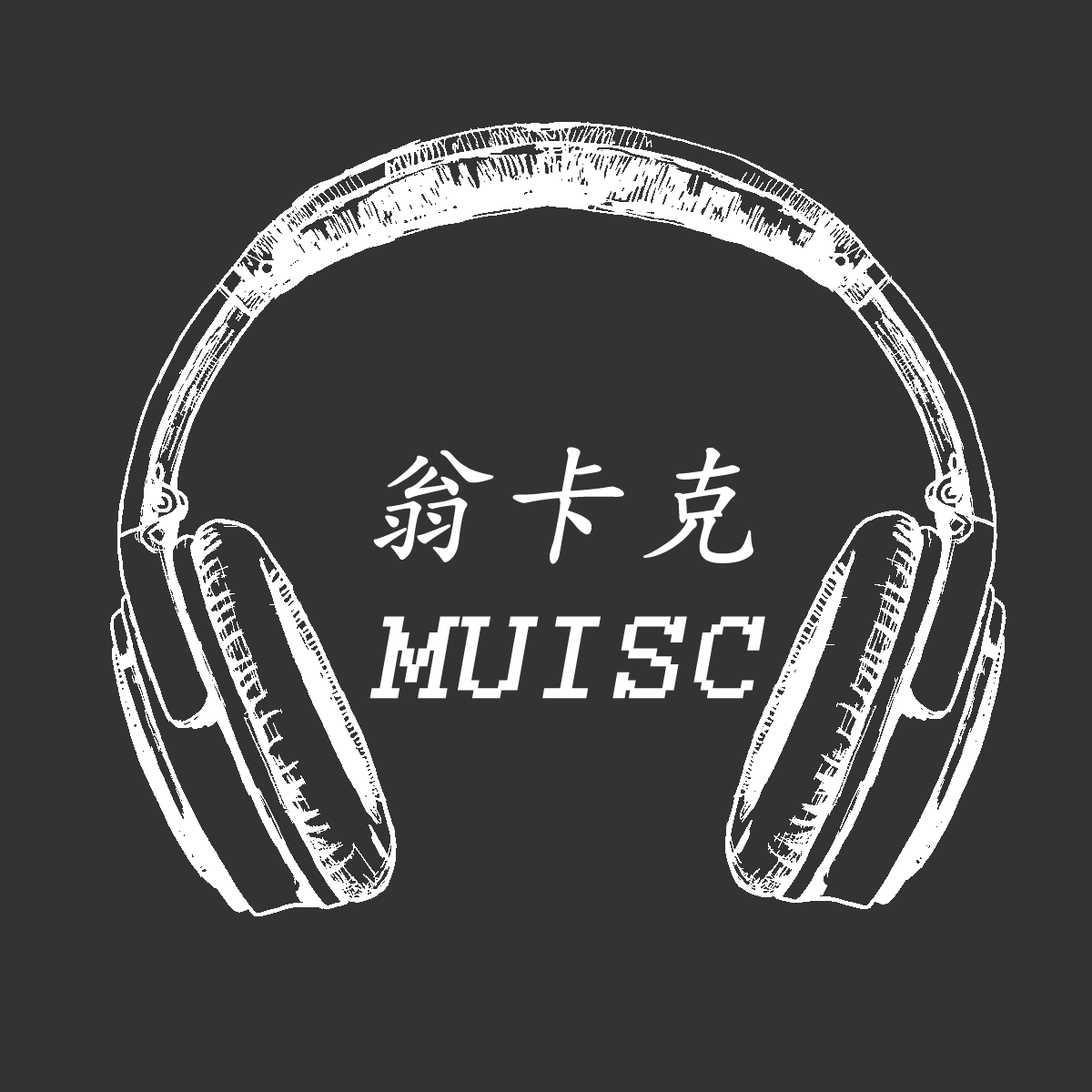
<style>
.page{position:relative;width:1092px;height:1092px;background:#333333}
.page>*{position:absolute;margin:0}
.t1{font:127.4px "Courier";letter-spacing:0.05em;color:#ffffff;font-weight:bold;font-style:italic}
.t2{font:127.4px "DFKaiShu-SB-Estd-BF";letter-spacing:0.05em;color:#ffffff;font-weight:bold;font-style:italic}
</style>
<div class="page">
<p class="t1" style="left:369px;top:447px;width:396px;height:252px;text-align:center"><span class="t2">翁卡克<br></span>MUISC</p>
</div>
